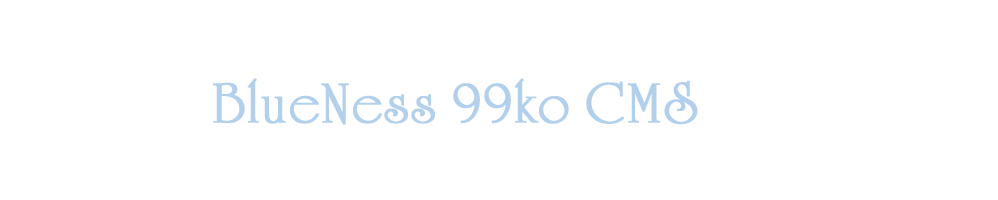
<style>
.page{position:relative;width:998px;height:200px;background:#ffffff}
.page>*{position:absolute;margin:0}
.t1{font:58px "UniversityRomanLetPlain";color:#b2d0ec;font-weight:bold}
</style>
<div class="page">
<p class="t1" style="left:213px;top:78px;width:485px;height:47px">BlueNess 99ko CMS</p>
</div>
